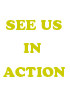
<style>
.page{position:relative;width:70px;height:100px;background:#ffffff}
.page>*{position:absolute;margin:0}
.t1{font:14px "CooperBlackStd";color:#cccc00}
</style>
<div class="page">
<p class="t1" style="left:6px;top:19px;width:56px;height:11px">SEE US</p>
<p class="t1" style="left:23px;top:43px;width:19px;height:10px">IN</p>
<p class="t1" style="left:3px;top:67px;width:63px;height:10px">ACTION</p>
</div>
